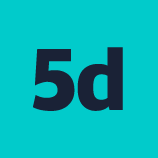
<style>
.page{position:relative;width:158px;height:158px;background:#01cbcb}
.page>*{position:absolute;margin:0}
.t1{font:87.5px "AppleSDGothicNeoH00";letter-spacing:0.04em;color:#1a2236}
</style>
<div class="page">
<p class="t1" style="left:33px;top:47px;width:90px;height:64px">5d</p>
</div>
